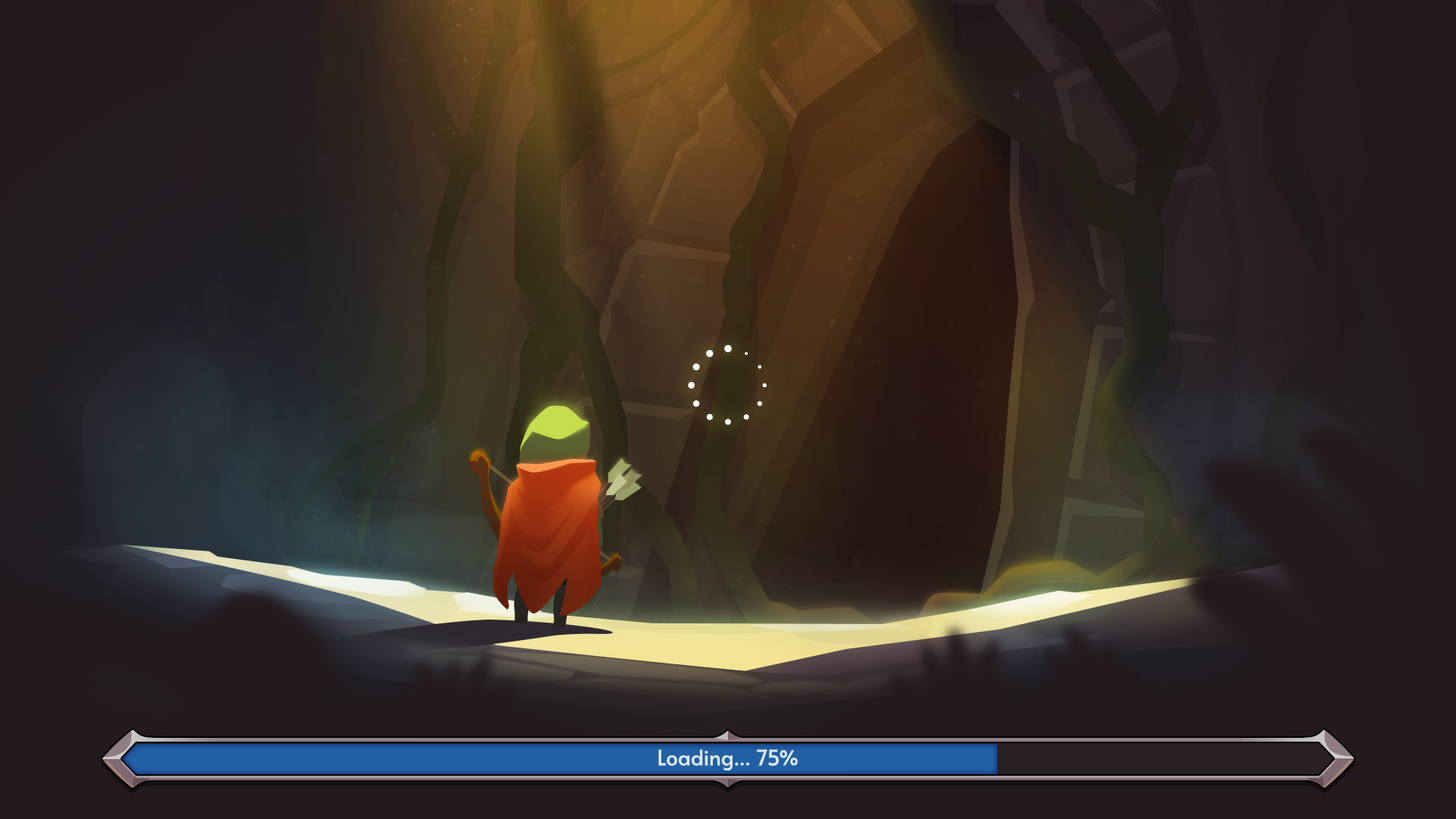
<style>
.page{position:relative;width:1456px;height:819px}
.page>*{position:absolute;margin:0}
.t1{font:21.2px "Alata-Regular";letter-spacing:0.01em;color:#dee7f1}
</style>
<div class="page">
<p class="t1" style="left:658px;top:749px;width:140px;height:21px">Loading... 75%</p>
</div>
